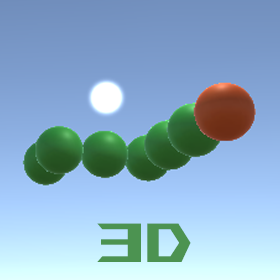
<style>
.page{position:relative;width:280px;height:280px}
.page>*{position:absolute;margin:0}
.t1{font:55px "AniMeMatrix-MB_EN";color:#4c9351;font-variant:small-caps}
</style>
<div class="page">
<p class="t1" style="left:97px;top:223px;width:94px;height:39px">3D</p>
</div>
